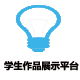
<style>
.page{position:relative;width:80px;height:80px;background:#ffffff}
.page>*{position:absolute;margin:0}
.t1{font:9.3px "MicrosoftYaHei-Bold";color:#090202}
</style>
<div class="page">
<p class="t1" style="left:4px;top:61px;width:75px;height:10px">学生作品展示平台</p>
</div>
